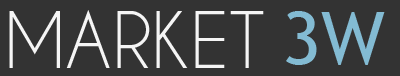
<style>
.page{position:relative;width:400px;height:76px;background:#333333}
.page>*{position:absolute;margin:0}
.t1{font:72.9px "CaviarDreams";color:#f5f5f5}
.t2{font:73.4px "TrebuchetMS";color:#83bbd3}
</style>
<div class="page">
<p class="t1" style="left:9px;top:10px;width:255px;height:58px">MARKET</p>
<p class="t2" style="left:286px;top:11px;width:99px;height:54px">3W</p>
</div>
